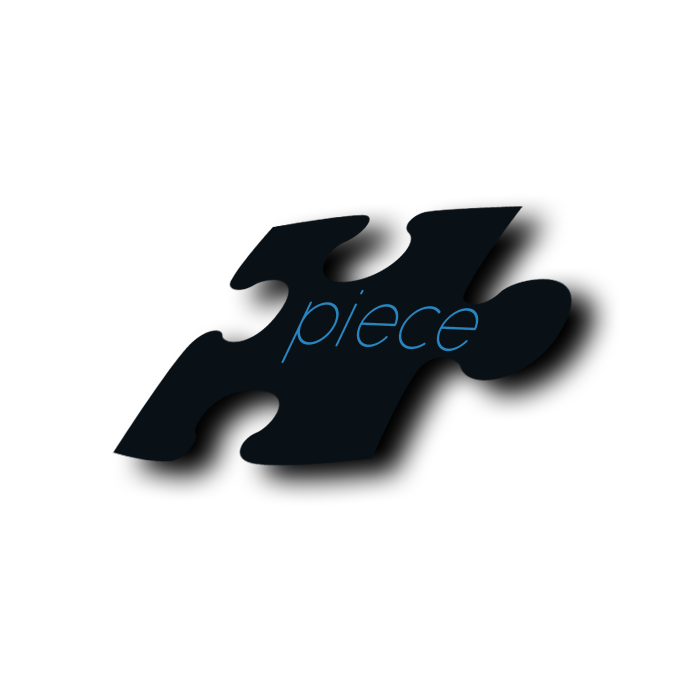
<style>
.page{position:relative;width:700px;height:700px;background:#ffffff}
.page>*{position:absolute;margin:0}
.t1{font:96.3px "QuicksandLight-Regular";letter-spacing:-0.06em;color:#2885bf;scale:0.79 1}
</style>
<div class="page">
<p class="t1" style="left:281px;top:289px;width:198px;height:75px;rotate:2deg">piece</p>
</div>
